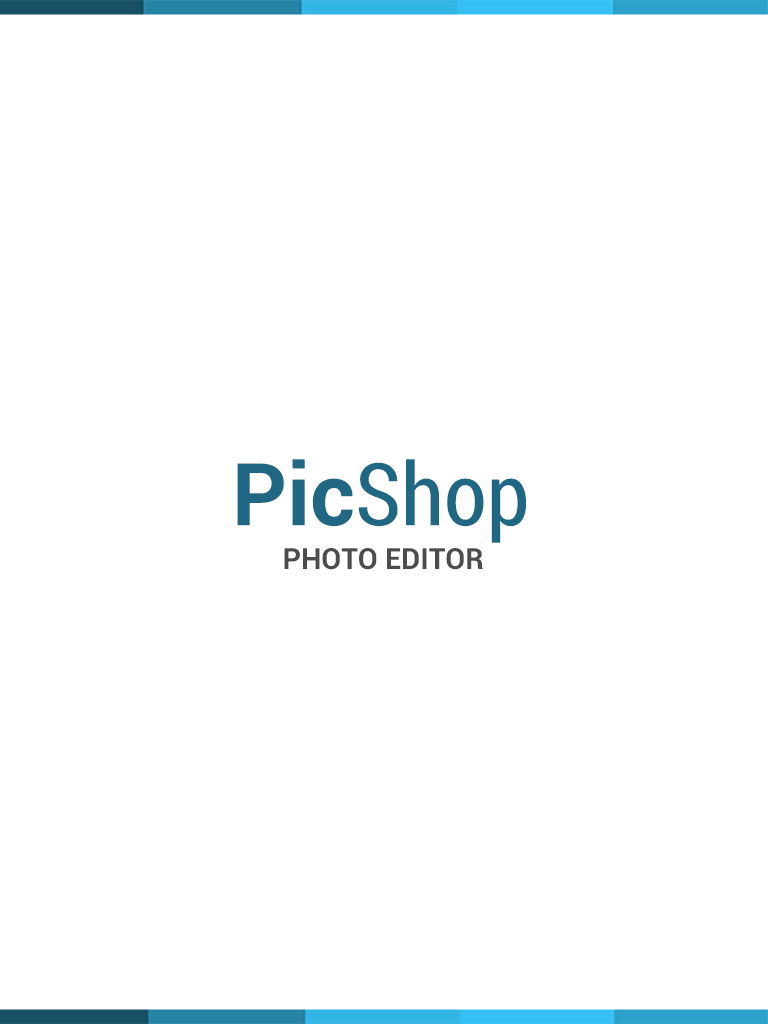
<style>
.page{position:relative;width:768px;height:1024px;background:#ffffff}
.page>*{position:absolute;margin:0}
.t1{font:86.8px "Roboto-Condensed";color:#1f6782}
.t2{font:86.8px "Roboto-Bold";color:#1f6782}
.t3{font:28.9px "Roboto-Bold";color:#4c4c4c}
</style>
<div class="page">
<p class="t1" style="left:237px;top:459px;width:289px;height:84px"><span class="t2">Pic</span>Shop</p>
<p class="t3" style="left:284px;top:548px;width:199px;height:22px">PHOTO EDITOR</p>
</div>
